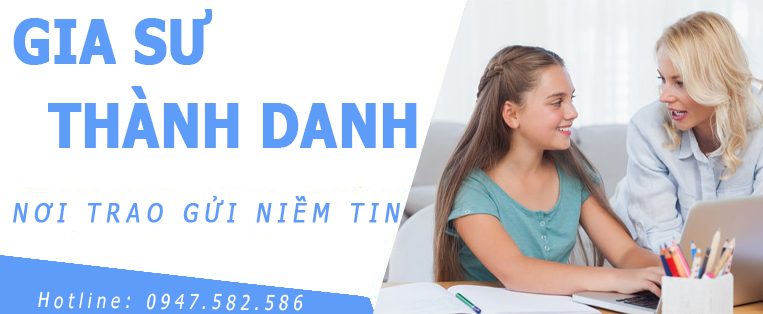
<style>
.page{position:relative;width:763px;height:314px;background:#ffffff}
.page>*{position:absolute;margin:0}
.t1{font:59.5px/84px "Tahoma-Bold";color:#5e9cf9;font-weight:bold;scale:0.88 1}
.t2{font:26.3px "Tahoma";letter-spacing:0.3em;color:#5e9cf9;font-weight:bold;font-style:italic;scale:0.82 1}
.t3{font:20.4px "Tahoma";letter-spacing:0.3em;color:#ffffff;font-style:italic;scale:0.82 1}
</style>
<div class="page">
<p class="t1" style="left:13px;top:9px;width:404px;height:139px">GIA SƯ <br> THÀNH DANH</p>
<p class="t2" style="left:13px;top:196px;width:387px;height:27px">NƠI TRAO GỬI NIỀM TIN</p>
<p class="t3" style="left:38px;top:291px;width:265px;height:20px;rotate:1deg">Hotline: 0947.582.586</p>
</div>
